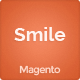
<style>
.page{position:relative;width:80px;height:80px}
.page>*{position:absolute;margin:0}
.t1{font:19px "Raleway-Bold";color:#fff3ef}
.t2{font:10px "Montserrat-Regular";letter-spacing:-0.067em;color:#ffd8c9}
</style>
<div class="page">
<p class="t1" style="left:14px;top:27px;width:52px;height:14px">Smile</p>
<p class="t2" style="left:19px;top:65px;width:42px;height:11px">Magento</p>
</div>
